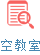
<style>
.page{position:relative;width:40px;height:55px;background:#ffffff}
.page>*{position:absolute;margin:0}
.t1{font:22.5px "SimSun";letter-spacing:0.075em;color:#4788b2;font-variant:small-caps}
</style>
<div class="page">
<p class="t1" style="left:1px;top:39px;width:39px;height:12px">空教室</p>
</div>
